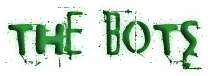
<style>
.page{position:relative;width:208px;height:76px;background:#ffffff}
.page>*{position:absolute;margin:0}
.t1{font:72px "CocaineSans";letter-spacing:0.025em;text-transform:uppercase}
</style>
<div class="page">
<p class="t1" style="left:5px;top:7px;width:199px;height:63px">The Bots</p>
</div>
